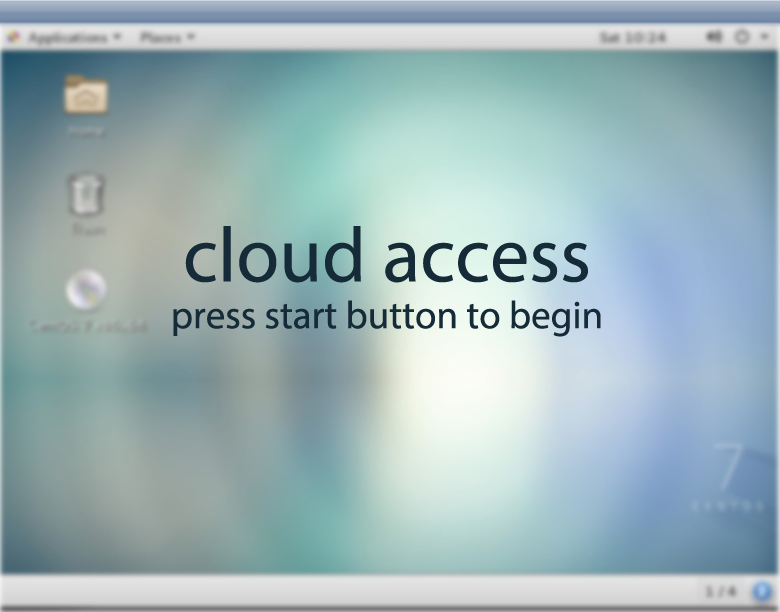
<style>
.page{position:relative;width:780px;height:612px}
.page>*{position:absolute;margin:0}
.t1{font:39px "MyriadPro-Regular";color:#162b38}
.t2{font:78px "MyriadPro-Regular";color:#162b38}
</style>
<div class="page">
<p class="t1" style="left:173px;top:226px;width:428px;height:111px;text-align:center"><span class="t2">cloud access<br></span>press start button to begin</p>
</div>
